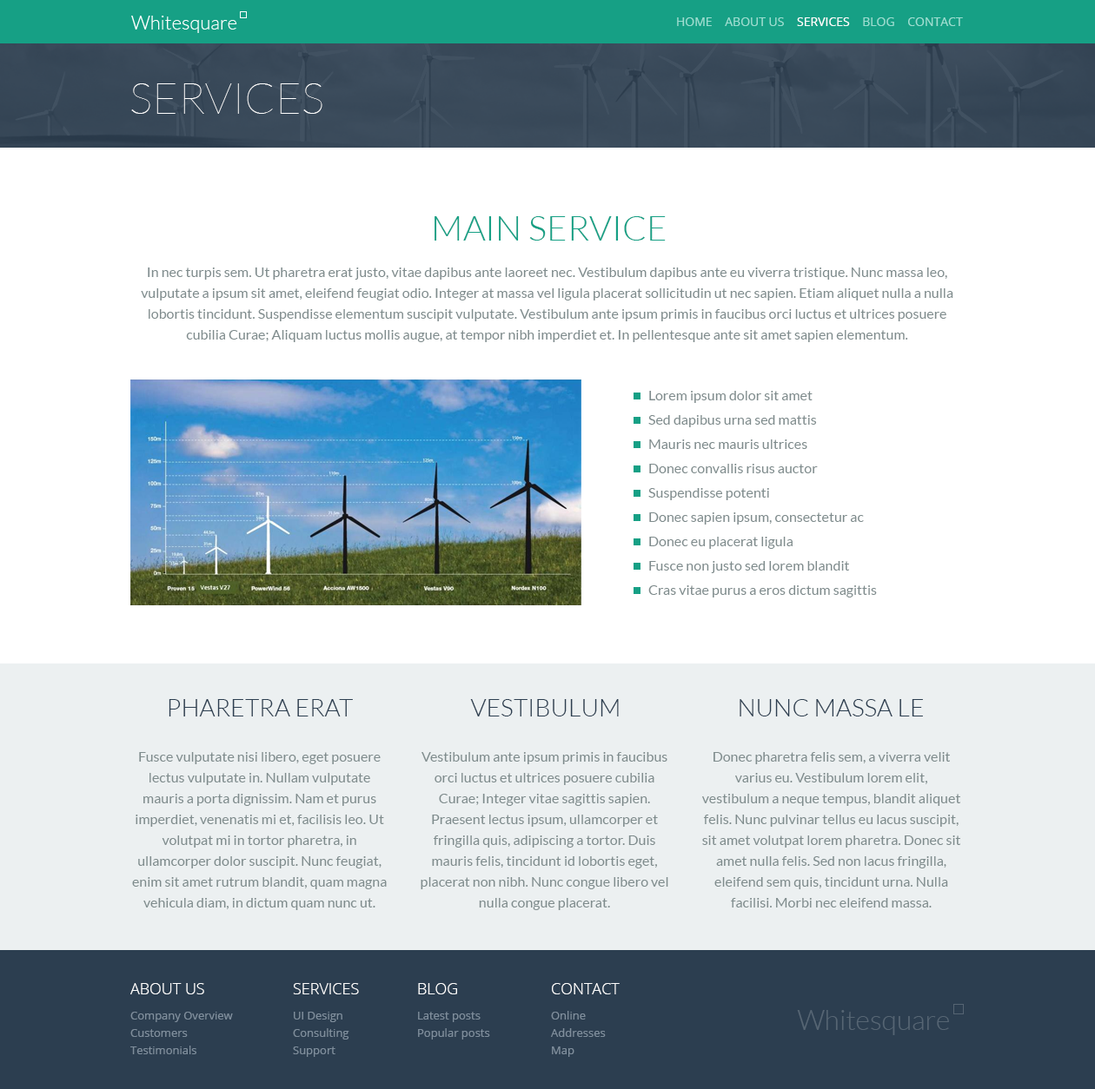
<style>
.page{position:relative;width:1095px;height:1089px;background:#ffffff}
.page>*{position:absolute;margin:0}
.t1{font:12.2px "OpenSans";color:#9bded1;text-transform:uppercase}
.t2{font:12.2px "OpenSans";color:#ffffff;text-transform:uppercase}
.t3{font:43.4px "Lato-Hairline";color:#ffffff;text-transform:uppercase}
.t4{font:34.7px "Lato-Light";color:#16a085;text-transform:uppercase}
.t5{font:13.9px/20.8px "Lato-Regular";color:#7f8c8d}
.t6{font:13.9px "Lato-Regular";color:#7f8c8d}
.t7{font:24.3px "Lato-Light";color:#2c3e50;text-transform:uppercase}
.t8{font:15.6px "OpenSans-Light";color:#ffffff;text-transform:uppercase}
.t9{font:11.3px/17.4px "OpenSans";color:#7f8e9c}
</style>
<div class="page">
<p class="t1" style="left:677px;top:17px;width:286px;height:9px">home    about us    <span class="t2">services</span>    blog    contact</p>
<p class="t3" style="left:131px;top:83px;width:191px;height:31px">Services</p>
<p class="t4" style="left:434px;top:216px;width:231px;height:25px">Main service</p>
<p class="t5" style="left:141px;top:268px;width:812px;height:74px;text-align:center">In nec turpis sem. Ut pharetra erat justo, vitae dapibus ante laoreet nec. Vestibulum dapibus ante eu viverra tristique. Nunc massa leo, vulputate a ipsum sit amet, eleifend feugiat odio. Integer at massa vel ligula placerat sollicitudin ut nec sapien. Etiam aliquet nulla a nulla lobortis tincidunt. Suspendisse elementum suscipit vulputate. Vestibulum ante ipsum primis in faucibus orci luctus et ultrices posuere cubilia Curae; Aliquam luctus mollis augue, at tempor nibh imperdiet et. In pellentesque ante sit amet sapien elementum.</p>
<p class="t6" style="left:649px;top:391px;width:163px;height:12px">Lorem ipsum dolor sit amet</p>
<p class="t6" style="left:648px;top:415px;width:169px;height:12px">Sed dapibus urna sed mattis</p>
<p class="t6" style="left:649px;top:440px;width:158px;height:9px">Mauris nec mauris ultrices</p>
<p class="t6" style="left:649px;top:464px;width:168px;height:9px">Donec convallis risus auctor</p>
<p class="t6" style="left:648px;top:488px;width:121px;height:12px">Suspendisse potenti</p>
<p class="t6" style="left:649px;top:513px;width:215px;height:12px">Donec sapien ipsum, consectetur ac</p>
<p class="t6" style="left:649px;top:537px;width:143px;height:12px">Donec eu placerat ligula</p>
<p class="t6" style="left:649px;top:561px;width:200px;height:12px">Fusce non justo sed lorem blandit</p>
<p class="t6" style="left:648px;top:586px;width:229px;height:12px">Cras vitae purus a eros dictum sagittis</p>
<p class="t7" style="left:169px;top:699px;width:184px;height:18px">pharetra erat</p>
<p class="t7" style="left:470px;top:699px;width:149px;height:18px">Vestibulum</p>
<p class="t7" style="left:739px;top:699px;width:184px;height:18px">Nunc massa le</p>
<p class="t5" style="left:132px;top:752px;width:255px;height:158px;text-align:center">Fusce vulputate nisi libero, eget posuere lectus vulputate in. Nullam vulputate mauris a porta dignissim. Nam et purus imperdiet, venenatis mi et, facilisis leo. Ut volutpat mi in tortor pharetra, in ullamcorper dolor suscipit. Nunc feugiat, enim sit amet rutrum blandit, quam magna vehicula diam, in dictum quam nunc ut.</p>
<p class="t5" style="left:420px;top:752px;width:248px;height:158px;text-align:center">Vestibulum ante ipsum primis in faucibus orci luctus et ultrices posuere cubilia Curae; Integer vitae sagittis sapien. Praesent lectus ipsum, ullamcorper et fringilla quis, adipiscing a tortor. Duis mauris felis, tincidunt id lobortis eget, placerat non nibh. Nunc congue libero vel nulla congue placerat.</p>
<p class="t5" style="left:702px;top:752px;width:258px;height:156px;text-align:center">Donec pharetra felis sem, a viverra velit varius eu. Vestibulum lorem elit, vestibulum a neque tempus, blandit aliquet felis. Nunc pulvinar tellus eu lacus suscipit, sit amet volutpat lorem pharetra. Donec sit amet nulla felis. Sed non lacus fringilla, eleifend sem quis, tincidunt urna. Nulla facilisi. Morbi nec eleifend massa.</p>
<p class="t8" style="left:130px;top:983px;width:74px;height:12px">about us</p>
<p class="t8" style="left:293px;top:983px;width:66px;height:12px">Services</p>
<p class="t8" style="left:418px;top:983px;width:39px;height:12px">Blog</p>
<p class="t8" style="left:552px;top:983px;width:67px;height:12px">Contact</p>
<p class="t9" style="left:130px;top:1012px;width:103px;height:43px">Company Overview<br>Customers<br>Testimonials</p>
<p class="t9" style="left:293px;top:1012px;width:56px;height:45px">UI Design<br>Consulting<br>Support</p>
<p class="t9" style="left:418px;top:1012px;width:72px;height:28px">Latest posts<br>Popular posts</p>
<p class="t9" style="left:551px;top:1011px;width:55px;height:46px">Online<br>Addresses<br>Map</p>
</div>
